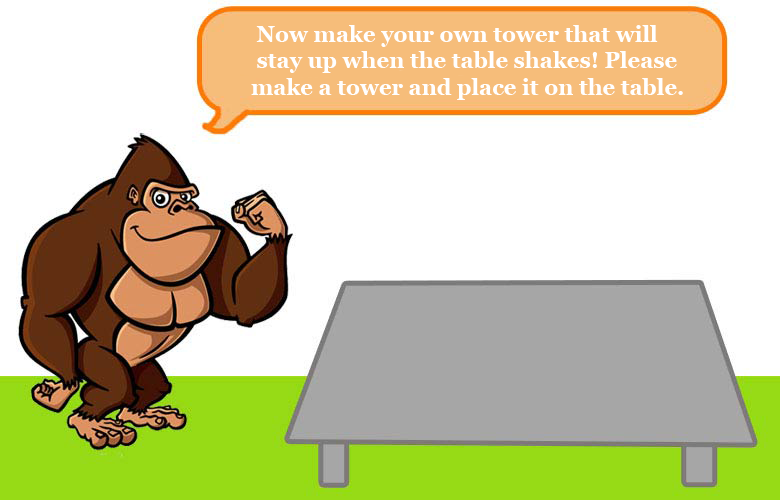
<style>
.page{position:relative;width:780px;height:500px;background:#ffffff}
.page>*{position:absolute;margin:0}
.t1{font:22px "Georgia-Bold";color:#ffffff}
</style>
<div class="page">
<p class="t1" style="left:251px;top:25px;width:432px;height:75px">Now make your own tower that will <br> stay up when the table shakes! Please <br>make a tower and place it on the table.</p>
</div>
